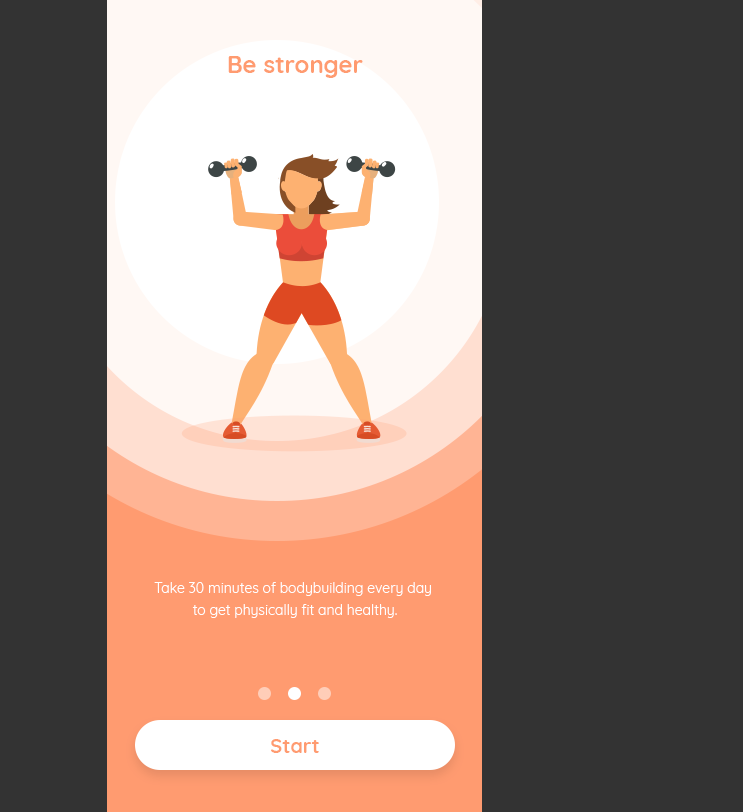
<style>
.page{position:relative;width:743px;height:812px;background:#333333}
.page>*{position:absolute;margin:0}
.t1{font:24px "Quicksand-Bold";color:#ff9b70}
.t2{font:14px/22px "Quicksand-Regular";color:#ffffff}
.t3{font:20px "Quicksand-Bold";color:#ff9b70}
</style>
<div class="page">
<p class="t1" style="left:228px;top:56px;width:135px;height:22px">Be stronger</p>
<p class="t2" style="left:154px;top:582px;width:277px;height:36px;text-align:center">Take 30 minutes of bodybuilding every day <br>to get physically fit and healthy.</p>
<p class="t3" style="left:271px;top:739px;width:48px;height:14px">Start</p>
</div>
